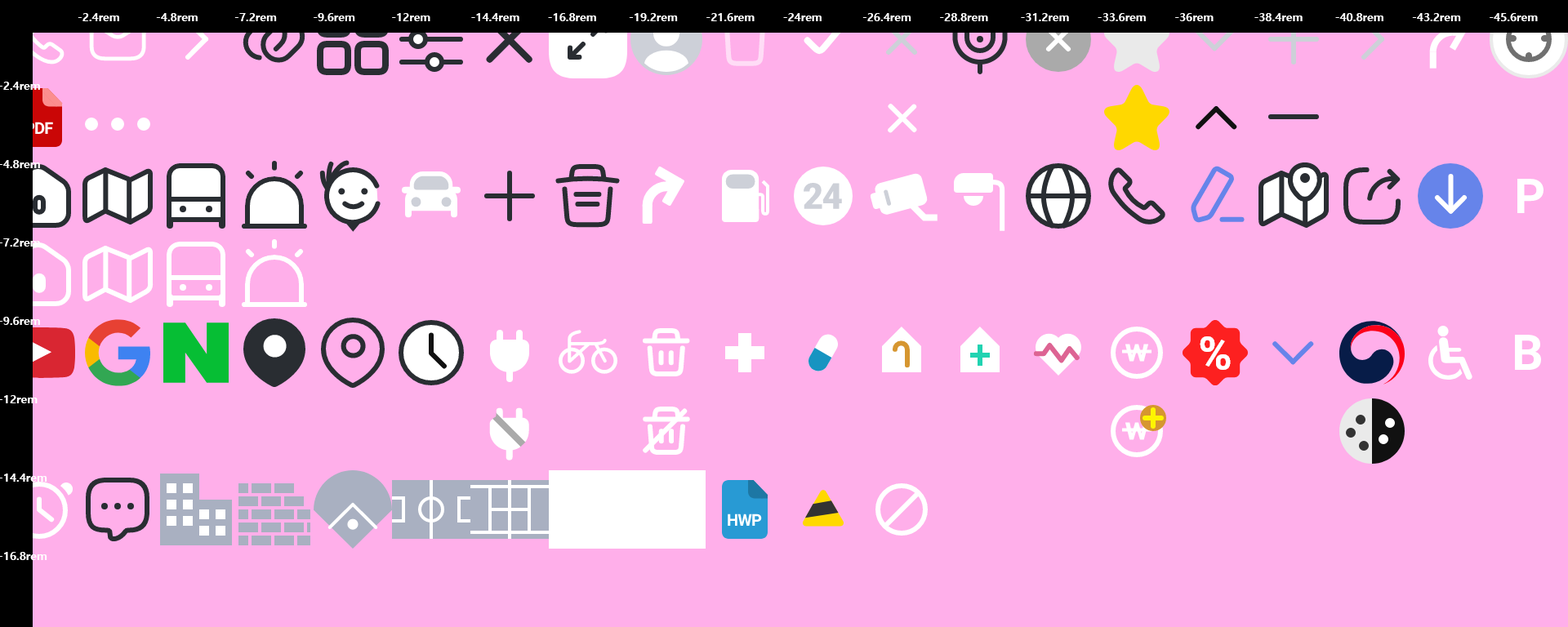
<style>
.page{position:relative;width:1568px;height:627px;background:#ffafea}
.page>*{position:absolute;margin:0}
.t1{font:11.4px "MalgunGothicBold";color:#ffffff}
.t2{font:11.4px/39.2px "MalgunGothicBold";color:#ffffff}
</style>
<div class="page">
<p class="t1" style="left:78px;top:13px;width:1460px;height:8px">-2.4rem         -4.8rem         -7.2rem         -9.6rem         -12rem          -14.4rem       -16.8rem        -19.2rem       -21.6rem       -24rem          -26.4rem       -28.8rem        -31.2rem       -33.6rem       -36rem          -38.4rem        -40.8rem       -43.2rem       -45.6rem</p>
<p class="t2" style="left:0px;top:82px;width:47px;height:478px">-2.4rem<br><br>-4.8rem<br><br>-7.2rem<br><br>-9.6rem<br><br>-12rem<br><br>-14.4rem<br><br>-16.8rem</p>
</div>
